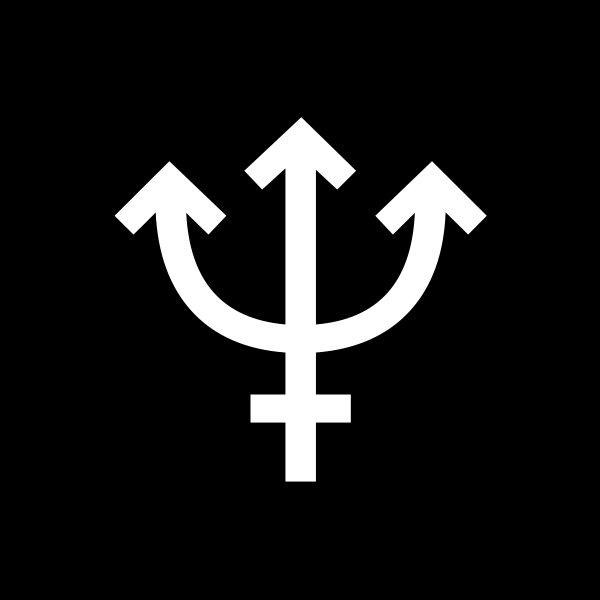
<style>
.page{position:relative;width:600px;height:600px;background:#000000}
.page>*{position:absolute;margin:0}
.t1{font:506.5px "ArialUnicodeMS";color:#ffffff}
</style>
<div class="page">
<p class="t1" style="left:114px;top:117px;width:373px;height:365px">♆</p>
</div>
